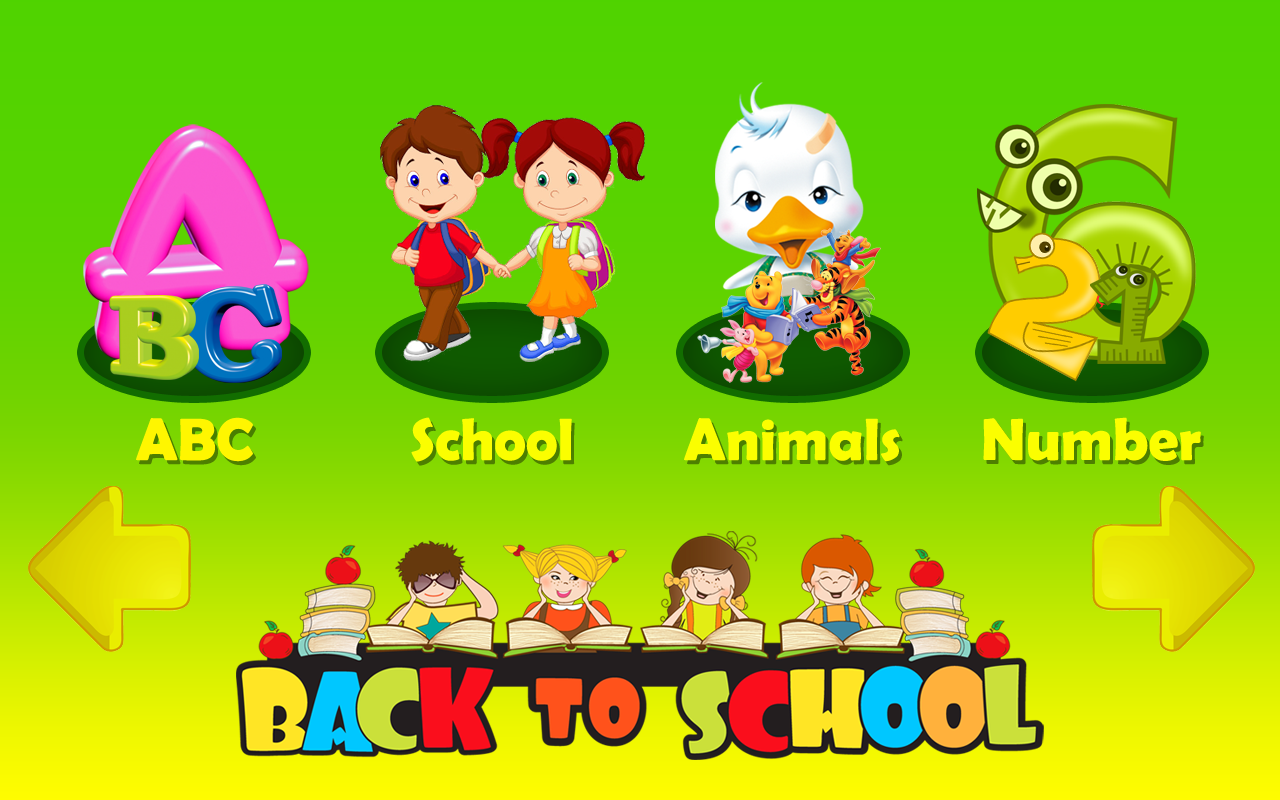
<style>
.page{position:relative;width:1280px;height:800px}
.page>*{position:absolute;margin:0}
.t1{font:60px "BerlinSansFBDemi-Bold";color:#fff600}
.t2{font:60px "BerlinSansFBDemi-Bold";color:#fbfe00}
</style>
<div class="page">
<p class="t1" style="left:136px;top:417px;width:117px;height:45px">ABC</p>
<p class="t2" style="left:411px;top:417px;width:161px;height:45px">School</p>
<p class="t2" style="left:684px;top:418px;width:216px;height:44px">Animals</p>
<p class="t2" style="left:983px;top:417px;width:218px;height:44px">Number</p>
</div>
